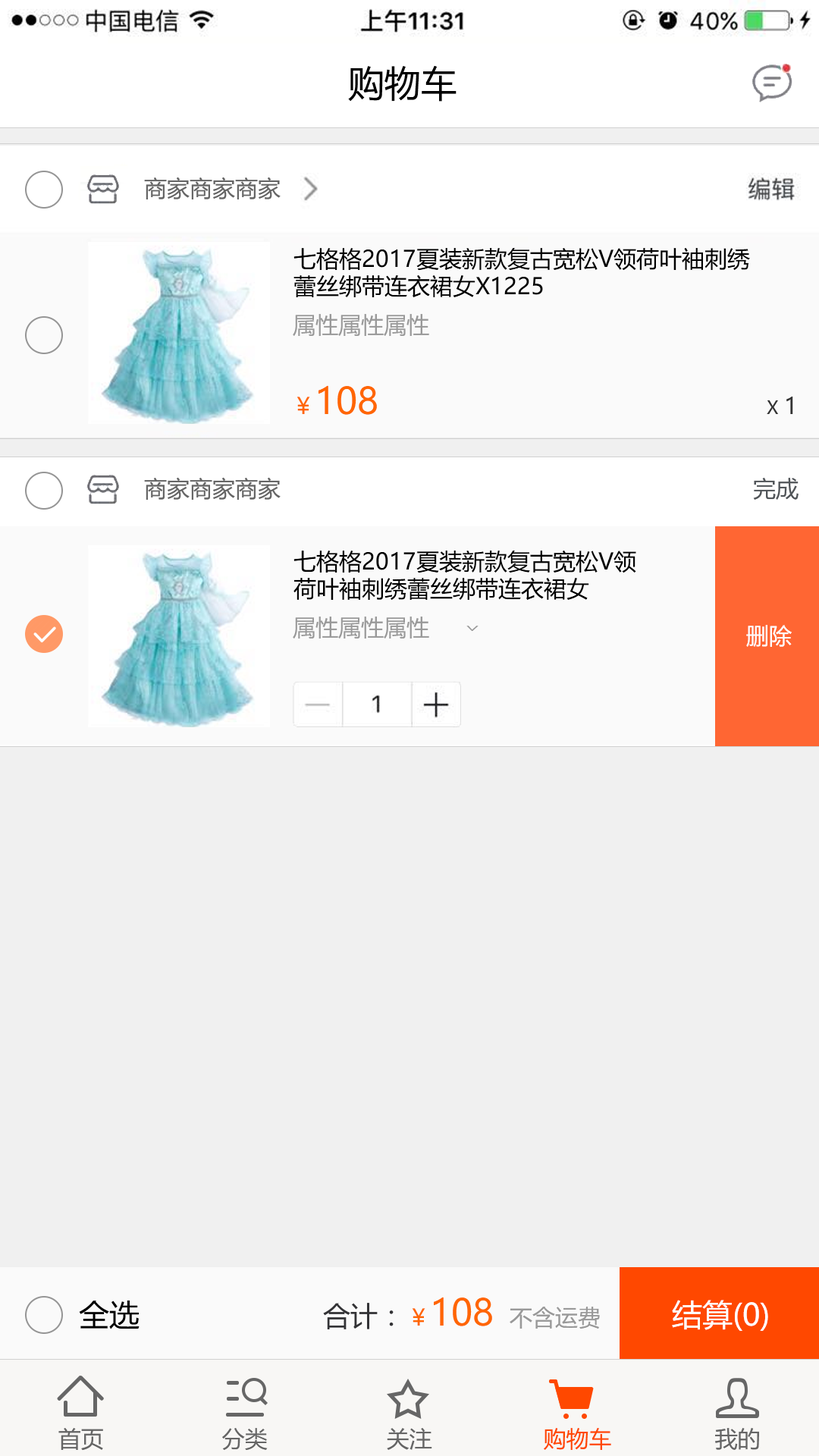
<style>
.page{position:relative;width:819px;height:1456px;background:#f0f0f0}
.page>*{position:absolute;margin:0}
.t1{font:36.4px "MicrosoftYaHei";color:#000000}
.t2{font:22.7px "MicrosoftYaHei";color:#666666}
.t3{font:22.7px/27.3px "MicrosoftYaHei";color:#000000}
.t4{font:22.7px "MicrosoftYaHei";color:#999999}
.t5{font:36.4px "MicrosoftYaHei";color:#ff6600}
.t6{font:22.7px "MicrosoftYaHei";color:#ff6600}
.t7{font:18.2px "MicrosoftYaHei";color:#333333}
.t8{font:22.7px "MicrosoftYaHei";color:#333333}
.t9{font:22.7px "MicrosoftYaHei";color:#515559}
.t10{font:22.7px "MicrosoftYaHei";color:#999999;scale:0.5 1}
.t11{font:22.7px "MicrosoftYaHei";color:#ffffff}
.t12{font:30.3px "MicrosoftYaHei";color:#000000}
.t13{font:30.3px "MicrosoftYaHei";color:#ffffff}
.t14{font:27.3px "MicrosoftYaHei";color:#333336}
.t15{font:22.7px "MicrosoftYaHei";color:#ff4800}
</style>
<div class="page">
<p class="t1" style="left:348px;top:65px;width:109px;height:37px">购物车</p>
<p class="t2" style="left:144px;top:177px;width:137px;height:22px">商家商家商家</p>
<p class="t3" style="left:293px;top:248px;width:457px;height:49px">七格格2017夏装新款复古宽松V领荷叶袖刺绣蕾丝绑带连衣裙女X1225</p>
<p class="t4" style="left:293px;top:314px;width:136px;height:22px">属性属性属性</p>
<p class="t5" style="left:297px;top:385px;width:80px;height:30px"><span class="t6">￥</span>108</p>
<p class="t7" style="left:767px;top:396px;width:26px;height:18px">X <span class="t8">1</span></p>
<p class="t2" style="left:144px;top:477px;width:137px;height:23px">商家商家商家</p>
<p class="t9" style="left:753px;top:478px;width:46px;height:22px">完成</p>
<p class="t3" style="left:293px;top:551px;width:343px;height:49px">七格格2017夏装新款复古宽松V领荷叶袖刺绣蕾丝绑带连衣裙女X1225</p>
<p class="t4" style="left:293px;top:617px;width:136px;height:22px">属性属性属性</p>
<p class="t10" style="left:466px;top:626px;width:13px;height:6px;rotate:90deg">&gt;</p>
<p class="t11" style="left:746px;top:625px;width:46px;height:22px">删除</p>
<p class="t12" style="left:79px;top:1300px;width:61px;height:29px">全选</p>
<p class="t5" style="left:412px;top:1297px;width:80px;height:29px"><span class="t6">￥</span>108</p>
<p class="t13" style="left:672px;top:1300px;width:96px;height:31px">结算(0)</p>
<p class="t14" style="left:323px;top:1303px;width:71px;height:26px">合计：</p>
<p class="t4" style="left:510px;top:1307px;width:90px;height:22px">不含运费</p>
<p class="t2" style="left:58px;top:1428px;width:45px;height:23px">首页</p>
<p class="t2" style="left:222px;top:1428px;width:46px;height:23px">分类</p>
<p class="t2" style="left:387px;top:1428px;width:45px;height:22px">关注</p>
<p class="t15" style="left:544px;top:1428px;width:67px;height:22px">购物车</p>
<p class="t2" style="left:715px;top:1428px;width:44px;height:22px">我的</p>
</div>
